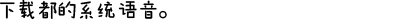
<style>
.page{position:relative;width:410px;height:20px;background:#ffffff}
.page>*{position:absolute;margin:0}
.t1{font:22px "¢è?";color:#000000}
</style>
<div class="page">
<p class="t1" style="left:0px;top:0px;width:167px;height:20px">下载都的系统语音。</p>
</div>
